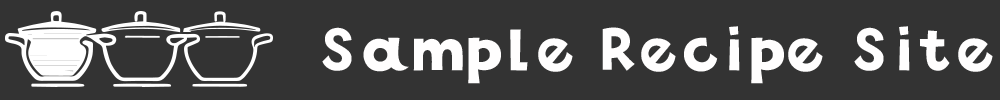
<style>
.page{position:relative;width:1000px;height:100px;background:#333333}
.page>*{position:absolute;margin:0}
.t1{font:67.2px "AB-kirigirisu";letter-spacing:-0.2em;color:#fffefe}
</style>
<div class="page">
<p class="t1" style="left:322px;top:26px;width:671px;height:58px">Sample Recipe Site</p>
</div>
